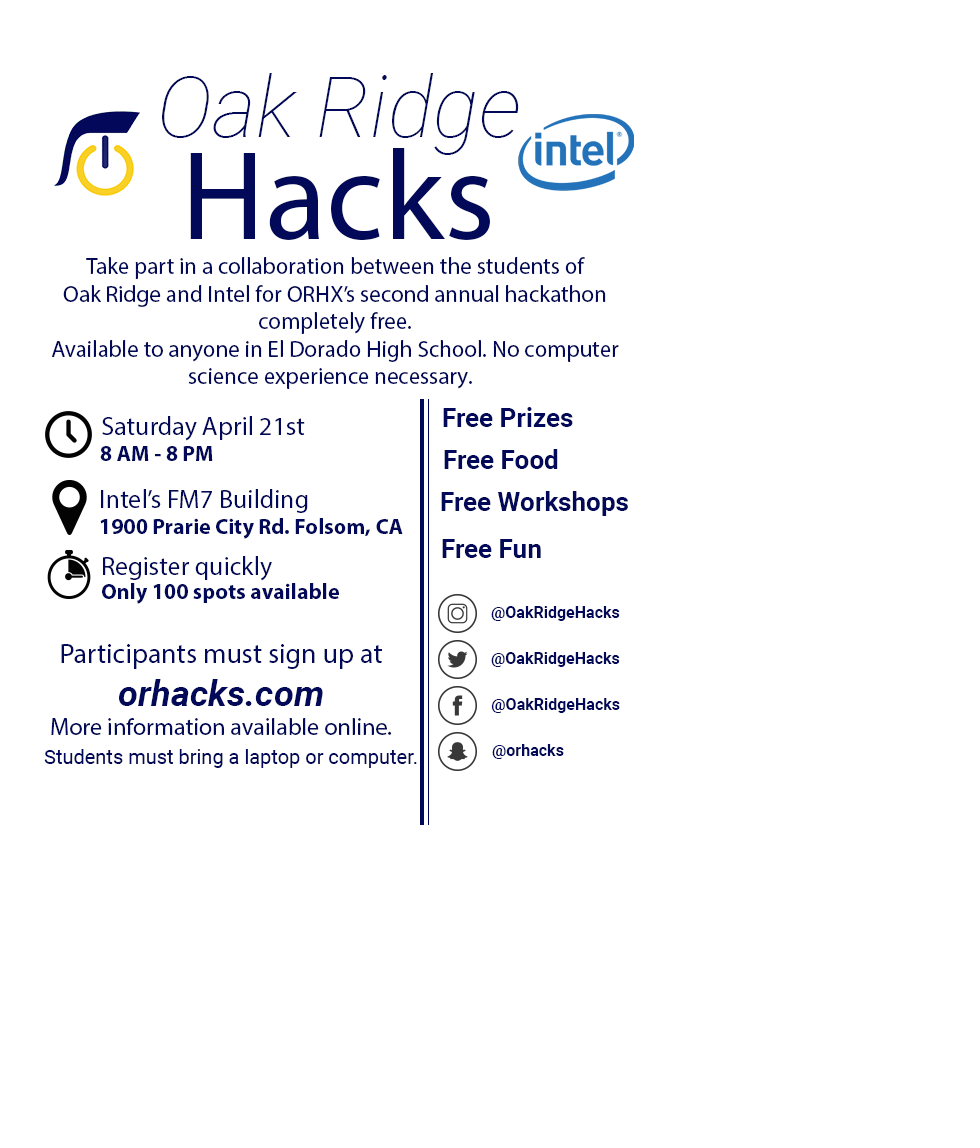
<style>
.page{position:relative;width:980px;height:1148px;background:#ffffff}
.page>*{position:absolute;margin:0}
.t1{font:85px "Roboto-ThinItalic";color:#000657}
.t2{font:128px "MyriadPro-Regular";color:#000657}
.t3{font:23px "MyriadPro-Regular";color:#000657}
.t4{font:26px "Roboto-Bold";color:#000657}
.t5{font:26px "MyriadPro-Regular";color:#000657}
.t6{font:22px "MyriadPro-Bold";color:#000657}
.t7{font:16px "Roboto-Bold";color:#000657}
.t8{font:24px "MyriadPro-Regular";color:#000657}
.t9{font:28px "MyriadPro-Regular";color:#000657}
.t10{font:36px "Roboto-BoldItalic";color:#000657}
.t11{font:20px "Roboto-Regular";color:#000657}
</style>
<div class="page">
<p class="t1" style="left:162px;top:73px;width:357px;height:82px">Oak Ridge</p>
<p class="t2" style="left:190px;top:148px;width:300px;height:92px">Hacks</p>
<p class="t3" style="left:51px;top:257px;width:568px;height:132px;text-align:center">Take part in a collaboration between the students of<br>Oak Ridge and Intel for ORHX’s second annual hackathon<br>completely free.<br>Available to anyone in El Dorado High School. No computer<br>science experience necessary.</p>
<p class="t4" style="left:443px;top:407px;width:130px;height:20px">Free Prizes</p>
<p class="t5" style="left:102px;top:416px;width:203px;height:25px">Saturday April 21st</p>
<p class="t6" style="left:100px;top:446px;width:113px;height:15px">8 AM - 8 PM</p>
<p class="t4" style="left:444px;top:449px;width:114px;height:20px">Free Food</p>
<p class="t6" style="left:100px;top:489px;width:303px;height:50px"><span class="t5">Intel’s FM7 Building<br></span>1900 Prarie City Rd. Folsom, CA</p>
<p class="t4" style="left:441px;top:491px;width:187px;height:25px">Free Workshops</p>
<p class="t4" style="left:442px;top:539px;width:99px;height:19px">Free Fun</p>
<p class="t5" style="left:103px;top:556px;width:169px;height:25px">Register quickly</p>
<p class="t6" style="left:102px;top:583px;width:237px;height:21px">Only 100 spots available</p>
<p class="t7" style="left:491px;top:606px;width:129px;height:15px">@OakRidgeHacks</p>
<p class="t8" style="left:51px;top:644px;width:341px;height:91px;text-align:center"><span class="t9">Participants must sign up at<br></span><span class="t10">orhacks.com<br></span>More information available online.</p>
<p class="t7" style="left:491px;top:652px;width:129px;height:15px">@OakRidgeHacks</p>
<p class="t7" style="left:491px;top:698px;width:129px;height:15px">@OakRidgeHacks</p>
<p class="t11" style="left:44px;top:749px;width:373px;height:19px">Students must bring a laptop or computer.</p>
<p class="t7" style="left:492px;top:744px;width:72px;height:15px">@orhacks</p>
</div>
